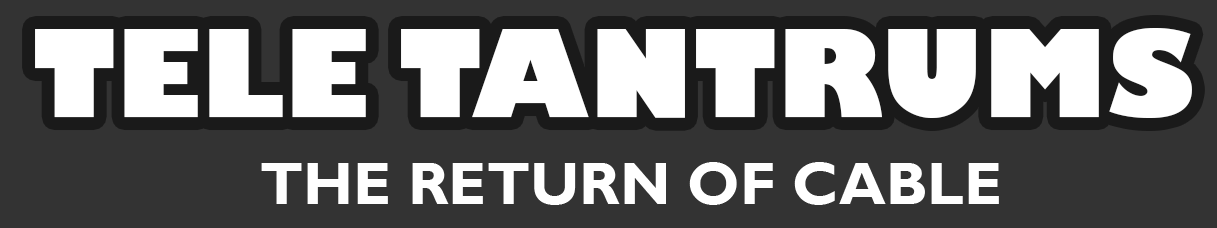
<style>
.page{position:relative;width:1217px;height:228px;background:#333333}
.page>*{position:absolute;margin:0}
.t1{font:118.5px "GillSans-UltraBold";color:#ffffff}
.t2{font:60px "GillSansMT-Bold";color:#ffffff;text-transform:uppercase}
</style>
<div class="page">
<p class="t1" style="left:35px;top:28px;width:1157px;height:90px">TELE TANTRUMS</p>
<p class="t2" style="left:261px;top:162px;width:738px;height:43px">The Return of CABLE</p>
</div>
